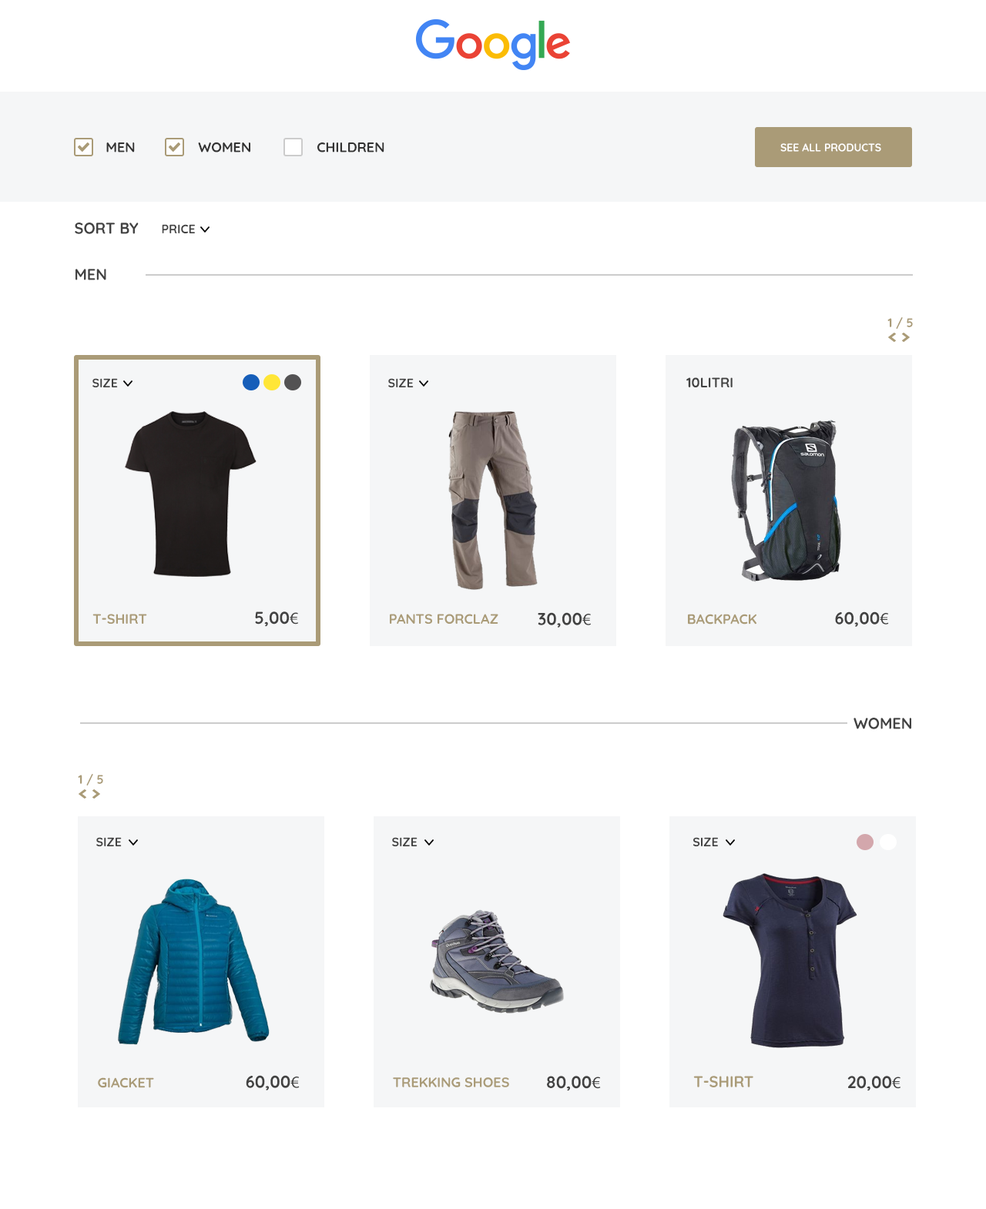
<style>
.page{position:relative;width:986px;height:1209px;background:#ffffff}
.page>*{position:absolute;margin:0}
.t1{font:13.9px "Quicksand-Bold";color:#333333;text-transform:uppercase}
.t2{font:10.8px "Quicksand-Bold";color:#ffffff;text-transform:uppercase}
.t3{font:15.4px "Quicksand-Bold";color:#424242;text-transform:uppercase}
.t4{font:12.3px "Quicksand-Bold";color:#424242;text-transform:uppercase}
.t5{font:12.3px "Quicksand-Bold";color:#aa9b77}
.t6{font:13.9px "Quicksand-Bold";color:#424242;text-transform:uppercase}
.t7{font:13.9px "Quicksand-Bold";color:#aa9b77;text-transform:uppercase}
.t8{font:16.9px "Quicksand-Bold";color:#424242;text-transform:uppercase}
.t9{font:16.9px "MyriadPro-Regular";color:#424242;text-transform:uppercase}
.t10{font:15.4px "Quicksand-Bold";color:#aa9b77;text-transform:uppercase}
</style>
<div class="page">
<p class="t1" style="left:106px;top:143px;width:29px;height:10px">Men</p>
<p class="t1" style="left:198px;top:142px;width:52px;height:11px">WoMen</p>
<p class="t1" style="left:317px;top:143px;width:67px;height:10px">children</p>
<p class="t2" style="left:780px;top:143px;width:101px;height:9px">see all products</p>
<p class="t3" style="left:75px;top:223px;width:64px;height:11px">Sort by</p>
<p class="t4" style="left:162px;top:224px;width:33px;height:10px">Price</p>
<p class="t3" style="left:75px;top:269px;width:31px;height:11px">men</p>
<p class="t5" style="left:887px;top:317px;width:26px;height:12px">1 / 5</p>
<p class="t6" style="left:686px;top:377px;width:47px;height:11px">10litri</p>
<p class="t4" style="left:92px;top:378px;width:26px;height:10px">size</p>
<p class="t4" style="left:388px;top:378px;width:26px;height:10px">size</p>
<p class="t7" style="left:92px;top:614px;width:55px;height:11px">T-shirt</p>
<p class="t8" style="left:255px;top:612px;width:43px;height:15px">5,00<span class="t9">€</span></p>
<p class="t7" style="left:390px;top:614px;width:108px;height:11px">Pants FORCLAZ</p>
<p class="t8" style="left:538px;top:612px;width:53px;height:16px">30,00<span class="t9">€</span></p>
<p class="t7" style="left:688px;top:614px;width:68px;height:11px">backpack</p>
<p class="t8" style="left:835px;top:612px;width:54px;height:15px">60,00<span class="t9">€</span></p>
<p class="t3" style="left:853px;top:718px;width:58px;height:11px">women</p>
<p class="t5" style="left:78px;top:774px;width:25px;height:12px">1 / 5</p>
<p class="t4" style="left:96px;top:837px;width:26px;height:10px">size</p>
<p class="t4" style="left:392px;top:837px;width:26px;height:10px">size</p>
<p class="t4" style="left:693px;top:837px;width:25px;height:10px">size</p>
<p class="t7" style="left:98px;top:1078px;width:56px;height:10px">Giacket</p>
<p class="t8" style="left:246px;top:1075px;width:54px;height:16px">60,00<span class="t9">€</span></p>
<p class="t7" style="left:393px;top:1078px;width:116px;height:10px">trekking shoes</p>
<p class="t8" style="left:547px;top:1076px;width:54px;height:16px">80,00<span class="t9">€</span></p>
<p class="t10" style="left:693px;top:1076px;width:60px;height:12px">T-shirt</p>
<p class="t8" style="left:847px;top:1076px;width:53px;height:16px">20,00<span class="t9">€</span></p>
</div>
